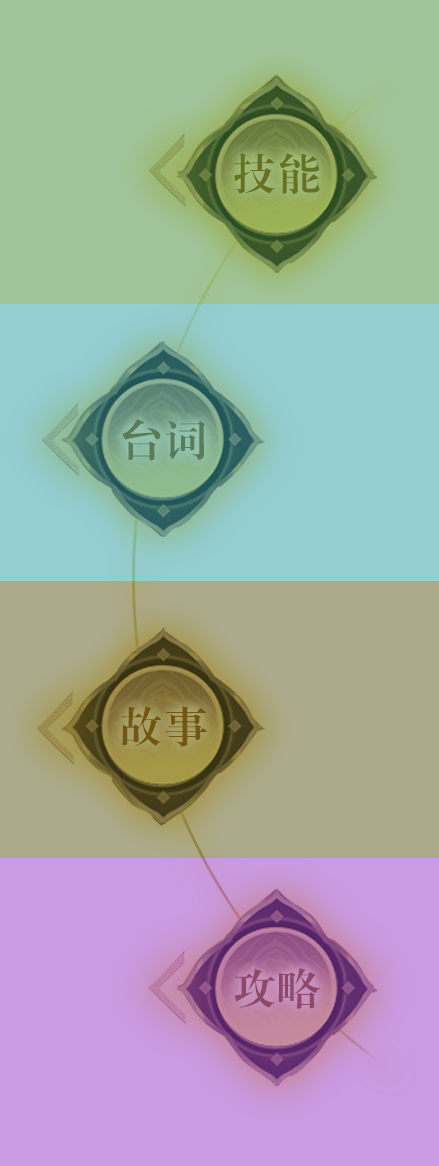
<style>
.page{position:relative;width:439px;height:1166px}
.page>*{position:absolute;margin:0}
.t1{font:42.7px "FZXBSK--GBK1-0";letter-spacing:0.05em}
.t2{font:42.7px "FZXBSK--GBK1-0";letter-spacing:0.05em;color:#667221}
.t3{font:42.7px "FZXBSK--GBK1-0";letter-spacing:0.05em;color:#5a7b58}
.t4{font:42.7px "FZXBSK--GBK1-0";letter-spacing:0.05em;color:#715711}
.t5{font:42.7px "FZXBSK--GBK1-0";letter-spacing:0.05em;color:#904868}
</style>
<div class="page">
<p class="t1" style="left:234px;top:151px;width:87px;height:41px">技能</p>
<p class="t2" style="left:234px;top:153px;width:86px;height:41px">技能</p>
<p class="t1" style="left:121px;top:417px;width:83px;height:42px">台词</p>
<p class="t3" style="left:122px;top:419px;width:83px;height:42px">台词</p>
<p class="t4" style="left:120px;top:707px;width:86px;height:41px">故事</p>
<p class="t4" style="left:121px;top:706px;width:86px;height:41px">故事</p>
<p class="t1" style="left:235px;top:965px;width:86px;height:41px">攻略</p>
<p class="t5" style="left:234px;top:968px;width:86px;height:41px">攻略</p>
</div>
